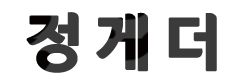
<style>
.page{position:relative;width:250px;height:84px;background:#ffffff}
.page>*{position:absolute;margin:0}
.t1{font:70.3px "YiSunShinDotumB";letter-spacing:0.12em;color:#3b3b3b;font-weight:bold}
</style>
<div class="page">
<p class="t1" style="left:26px;top:12px;width:191px;height:61px">정게더</p>
</div>
